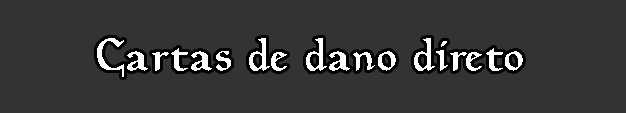
<style>
.page{position:relative;width:626px;height:113px;background:#333333}
.page>*{position:absolute;margin:0}
.t1{font:45.9px "Planewalker";color:#ffffff}
</style>
<div class="page">
<p class="t1" style="left:97px;top:38px;width:426px;height:39px">Cartas de dano direto</p>
</div>
